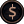
<style>
.page{position:relative;width:24px;height:24px}
.page>*{position:absolute;margin:0}
.t1{font:20px "Candara"}
.t2{font:20px "Candara";color:#c0957d}
</style>
<div class="page">
<p class="t1" style="left:8px;top:4px;width:7px;height:16px">$</p>
<p class="t2" style="left:9px;top:4px;width:7px;height:16px">$</p>
</div>
